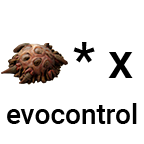
<style>
.page{position:relative;width:144px;height:144px;background:#ffffff}
.page>*{position:absolute;margin:0}
.t1{font:50px "Roboto-Medium";color:#000000}
.t2{font:28px "Roboto-Medium";color:#000000}
</style>
<div class="page">
<p class="t1" style="left:73px;top:42px;width:60px;height:36px">* x</p>
<p class="t2" style="left:7px;top:103px;width:130px;height:21px">evocontrol</p>
</div>
